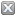
<style>
.page{position:relative;width:16px;height:16px;background:#ffffff}
.page>*{position:absolute;margin:0}
.t1{font:15.8px "MyriadPro-Semibold";letter-spacing:0.04em;color:#ffffff;scale:1.32 1}
</style>
<div class="page">
<p class="t1" style="left:3px;top:4px;width:10px;height:8px">x</p>
</div>
